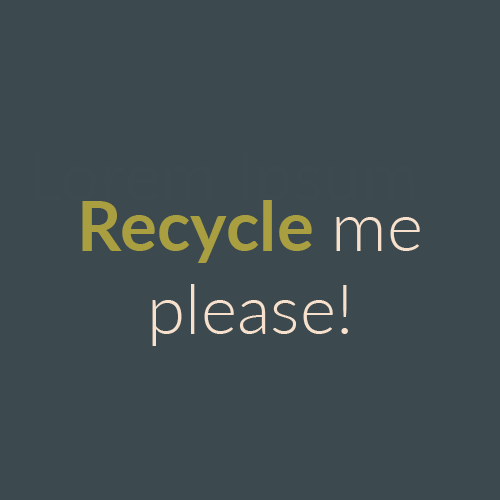
<style>
.page{position:relative;width:500px;height:500px;background:#3c4a50}
.page>*{position:absolute;margin:0}
.t1{font:69.4px "Lato-Light";color:#f7e2cd}
.t2{font:69.4px "Lato-Bold";color:#a9a040}
</style>
<div class="page">
<p class="t1" style="left:82px;top:200px;width:338px;height:146px;text-align:center"><span class="t2">Recycle </span>me please!</p>
</div>
